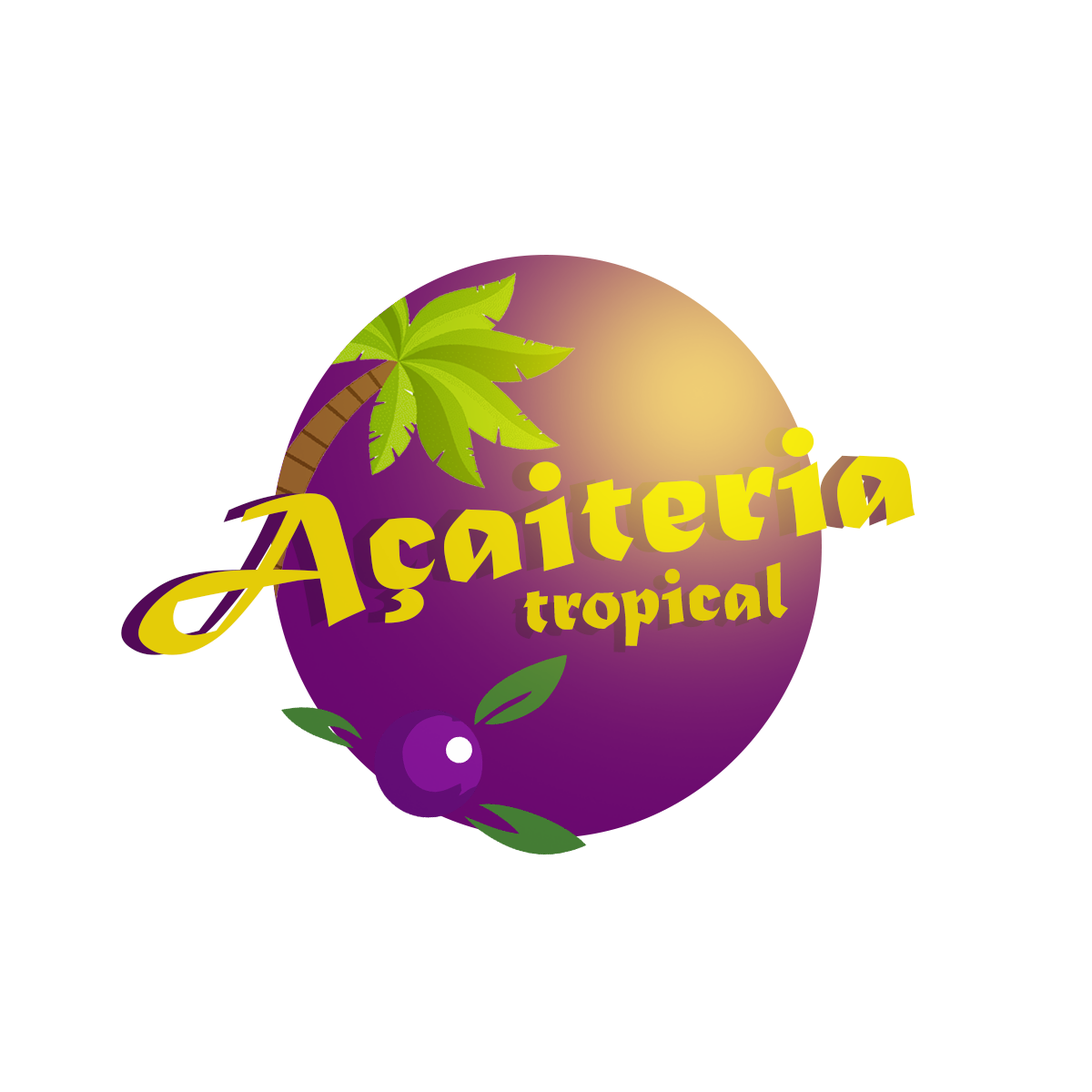
<style>
.page{position:relative;width:1092px;height:1092px;background:#ffffff}
.page>*{position:absolute;margin:0}
.t1{font:163.9px "MaturaMTScriptCapitals";scale:1.07 1}
.t2{font:163.9px "MaturaMTScriptCapitals";color:#e4cc09;scale:1.07 1}
.t3{font:83.4px "MaturaMTScriptCapitals";color:#e4cc08}
</style>
<div class="page">
<p class="t1" style="left:121px;top:427px;width:777px;height:228px;rotate:-8deg">Açaiteria</p>
<p class="t2" style="left:138px;top:427px;width:777px;height:228px;rotate:-8deg">Açaiteria</p>
<p class="t3" style="left:523px;top:561px;width:265px;height:85px;rotate:-4deg">tropical</p>
</div>
